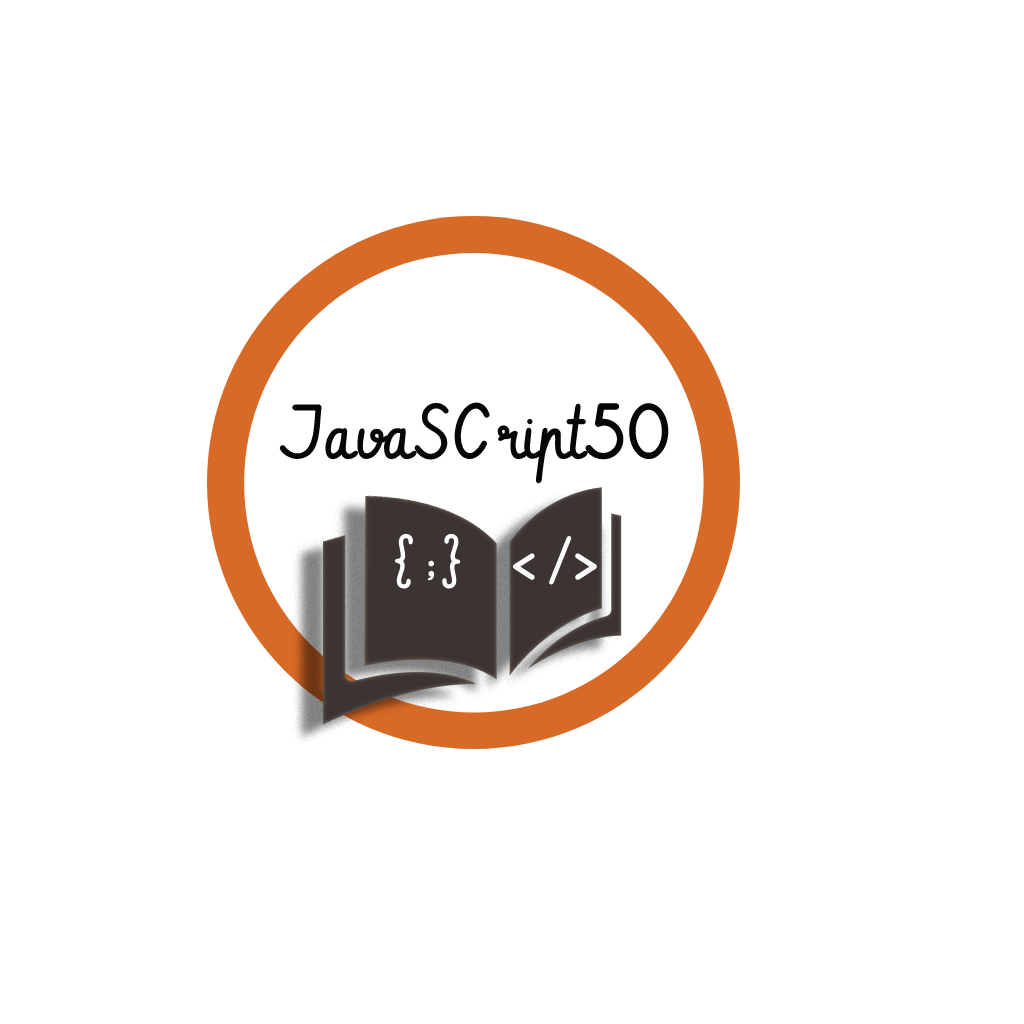
<style>
.page{position:relative;width:1024px;height:1024px;background:#ffffff}
.page>*{position:absolute;margin:0}
.t1{font:74px "Vibur";color:#070606}
.t2{font:64px "Vibur";color:#fdfdfd}
</style>
<div class="page">
<p class="t1" style="left:279px;top:402px;width:390px;height:82px">JavaSCript50</p>
<p class="t2" style="left:394px;top:533px;width:67px;height:56px">{;}</p>
<p class="t2" style="left:512px;top:536px;width:85px;height:49px">&lt;/&gt;</p>
</div>
